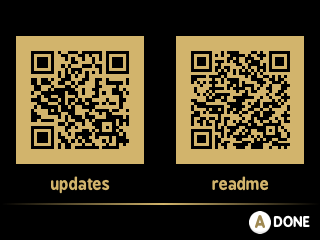
<style>
.page{position:relative;width:320px;height:240px;background:#000000}
.page>*{position:absolute;margin:0}
.t1{font:16px "BPreplay-Bold";color:#d2b46c}
.t2{font:16px "BPreplay-Bold";color:#9f8952}
.t3{font:14px "BPreplay-Bold";color:#ffffff}
</style>
<div class="page">
<p class="t1" style="left:51px;top:176px;width:59px;height:18px">updates</p>
<p class="t1" style="left:212px;top:176px;width:57px;height:15px">readme</p>
<p class="t2" style="left:255px;top:215px;width:10px;height:13px">A</p>
<p class="t3" style="left:273px;top:215px;width:37px;height:13px">DONE</p>
</div>
